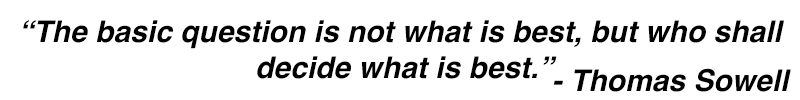
<style>
.page{position:relative;width:800px;height:100px;background:#ffffff}
.page>*{position:absolute;margin:0}
.t1{font:30px "Helvetica-BoldOblique";color:#000000}
</style>
<div class="page">
<p class="t1" style="left:23px;top:20px;width:761px;height:59px;text-align:center">“The basic question is not what is best, but who shall<br> decide what is best.”</p>
<p class="t1" style="left:553px;top:68px;width:238px;height:24px">- Thomas Sowell</p>
</div>
